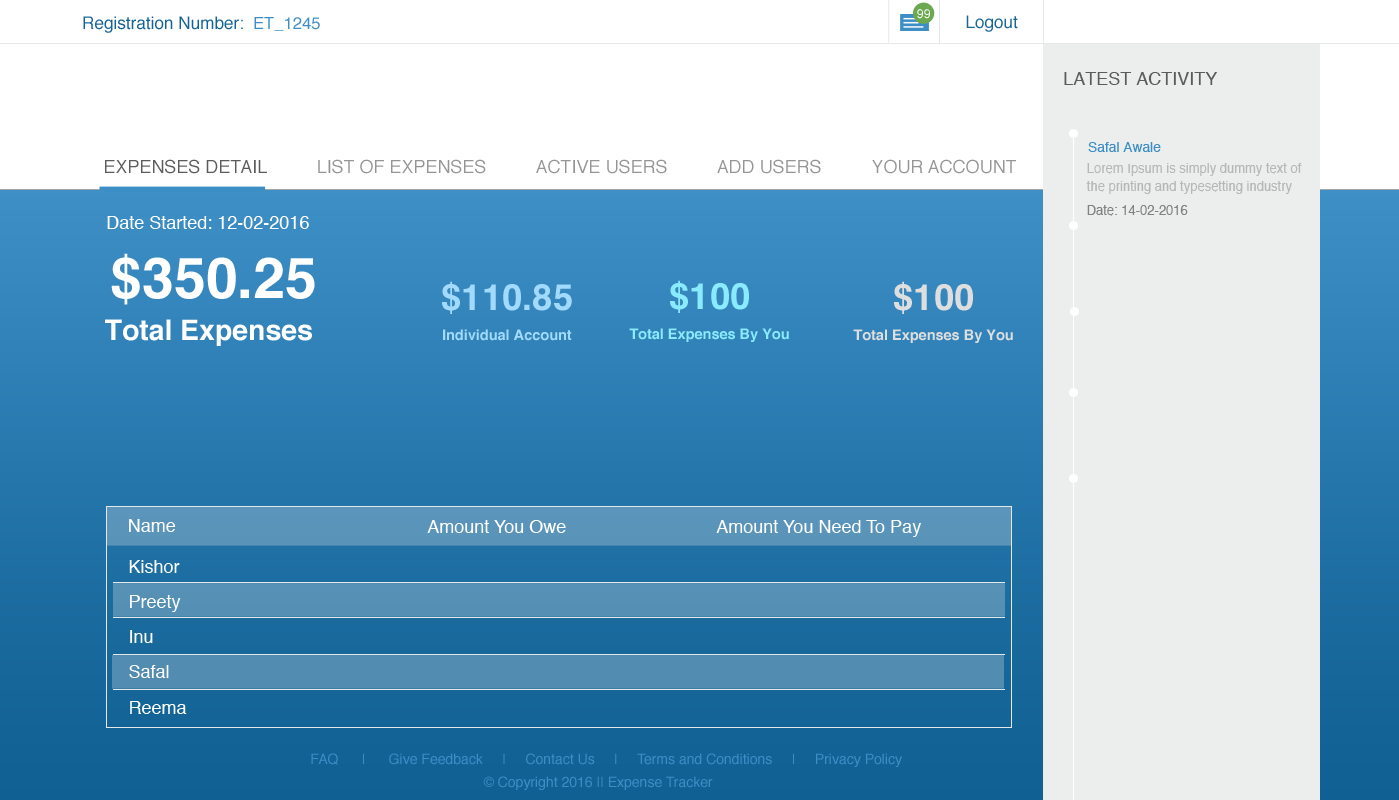
<style>
.page{position:relative;width:1399px;height:800px}
.page>*{position:absolute;margin:0}
.t1{font:17.1px "Helvetica";color:#136396}
.t2{font:16.6px "Helvetica";color:#3c8ec5}
.t3{font:12.3px "Helvetica";color:#ffffff}
.t4{font:17.1px "Helvetica";color:#17679a}
.t5{font:18px "Helvetica";color:#5b5b5b;text-transform:uppercase}
.t6{font:13.8px "Helvetica";color:#3c8ec4}
.t7{font:18px "Helvetica";color:#969595;text-transform:uppercase}
.t8{font:13px/18.3px "Helvetica";color:#b7b7b7}
.t9{font:13px "Helvetica";color:#818181}
.t10{font:18px "Helvetica";color:#ffffff}
.t11{font:57px "Helvetica-Bold";color:#ffffff}
.t12{font:36.5px "Helvetica-Bold";color:#a2dafe}
.t13{font:36.5px "Helvetica-Bold";color:#8aeaff}
.t14{font:36.5px "Helvetica-Bold";color:#dedede}
.t15{font:28.4px "Helvetica-Bold";color:#ffffff}
.t16{font:14.5px "Helvetica-Bold";color:#a2dafe}
.t17{font:14.5px "Helvetica-Bold";color:#8aeaff}
.t18{font:14.5px "Helvetica-Bold";color:#dedede}
.t19{font:18px/35.3px "Helvetica";color:#ffffff}
.t20{font:14px "Helvetica";color:#3c8ec5}
</style>
<div class="page">
<p class="t1" style="left:83px;top:16px;width:160px;height:17px">Registration Number:</p>
<p class="t2" style="left:254px;top:17px;width:66px;height:14px">ET_1245</p>
<p class="t3" style="left:917px;top:9px;width:13px;height:10px">99</p>
<p class="t4" style="left:966px;top:15px;width:52px;height:17px">Logout</p>
<p class="t5" style="left:1064px;top:72px;width:153px;height:13px">Latest Activity</p>
<p class="t6" style="left:1088px;top:142px;width:73px;height:10px">Safal Awale</p>
<p class="t7" style="left:105px;top:159px;width:911px;height:15px"><span class="t5">Expenses Detail        </span>  List of Expenses          Active Users          Add Users          Your Account</p>
<p class="t8" style="left:1086px;top:163px;width:216px;height:31px">Lorem Ipsum is simply dummy text of the printing and typesetting industry</p>
<p class="t9" style="left:1087px;top:205px;width:101px;height:11px">Date: 14-02-2016</p>
<p class="t10" style="left:107px;top:216px;width:202px;height:13px">Date Started: 12-02-2016</p>
<p class="t11" style="left:111px;top:253px;width:204px;height:52px">$350.25</p>
<p class="t12" style="left:442px;top:281px;width:130px;height:33px">$110.85</p>
<p class="t13" style="left:670px;top:280px;width:79px;height:33px">$100</p>
<p class="t14" style="left:894px;top:281px;width:79px;height:33px">$100</p>
<p class="t15" style="left:105px;top:319px;width:207px;height:27px">Total Expenses</p>
<p class="t16" style="left:443px;top:329px;width:129px;height:12px">Individual Account</p>
<p class="t17" style="left:629px;top:328px;width:160px;height:14px">Total Expenses By You</p>
<p class="t18" style="left:853px;top:329px;width:160px;height:14px">Total Expenses By You</p>
<p class="t10" style="left:129px;top:519px;width:47px;height:13px">Name</p>
<p class="t10" style="left:427px;top:520px;width:139px;height:13px">Amount You Owe</p>
<p class="t10" style="left:716px;top:520px;width:205px;height:17px">Amount You Need To Pay</p>
<p class="t19" style="left:129px;top:560px;width:58px;height:154px">Kishor<br>Preety<br>Inu<br>Safal<br>Reema</p>
<p class="t20" style="left:311px;top:753px;width:591px;height:14px">FAQ      |      Give Feedback     |     Contact Us     |     Terms and Conditions     |     Privacy Policy</p>
<p class="t20" style="left:483px;top:776px;width:230px;height:14px">© Copyright 2016 || Expense Tracker</p>
</div>
